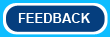
<style>
.page{position:relative;width:110px;height:37px;background:#053e7e}
.page>*{position:absolute;margin:0}
.t1{font:13px "Arial-BoldMT";color:#ffffff}
</style>
<div class="page">
<p class="t1" style="left:18px;top:13px;width:72px;height:10px">FEEDBACK</p>
</div>
